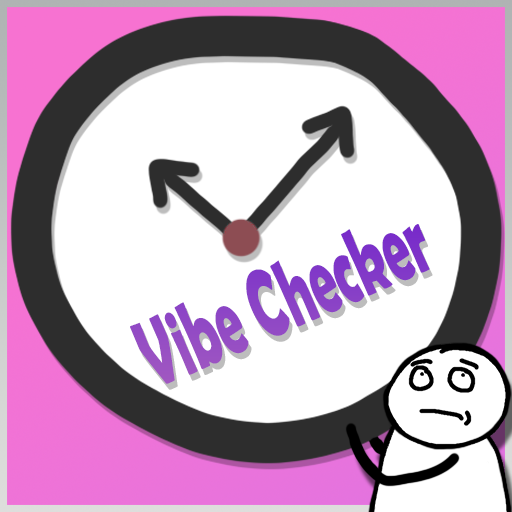
<style>
.page{position:relative;width:512px;height:512px;background:#ffffff}
.page>*{position:absolute;margin:0}
.t1{font:98.2px "BerlinSansFBDemi-Bold";color:#8a42c6;scale:0.54 1}
</style>
<div class="page">
<p class="t1" style="left:130px;top:224px;width:300px;height:160px;rotate:-24deg">Vibe Checker</p>
</div>
